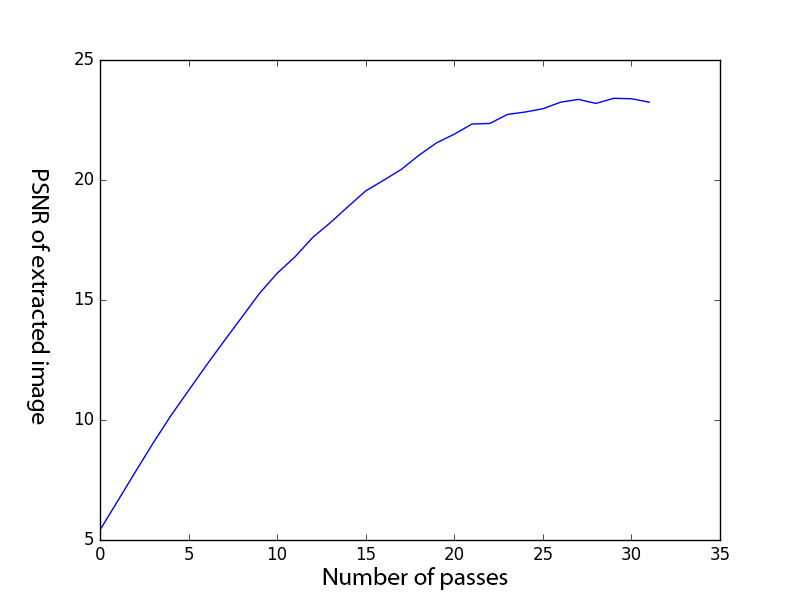
<style>
.page{position:relative;width:800px;height:600px;background:#ffffff}
.page>*{position:absolute;margin:0}
.t1{font:25px "MyriadHebrew-Regular";color:#000000}
</style>
<div class="page">
<p class="t1" style="left:27px;top:170px;width:23px;height:255px;text-align:right">PSNR of extracted image</p>
<p class="t1" style="left:323px;top:567px;width:185px;height:23px">Number of passes</p>
</div>
